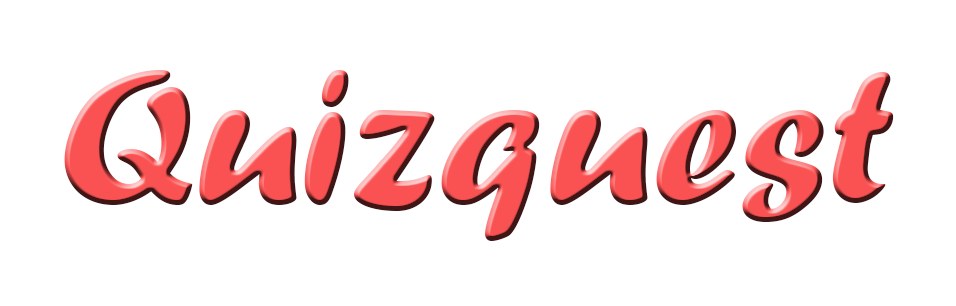
<style>
.page{position:relative;width:956px;height:306px;background:#ffffff}
.page>*{position:absolute;margin:0}
.t1{font:200px "ForteMT"}
</style>
<div class="page">
<p class="t1" style="left:64px;top:70px;width:830px;height:171px">Quizquest</p>
</div>
